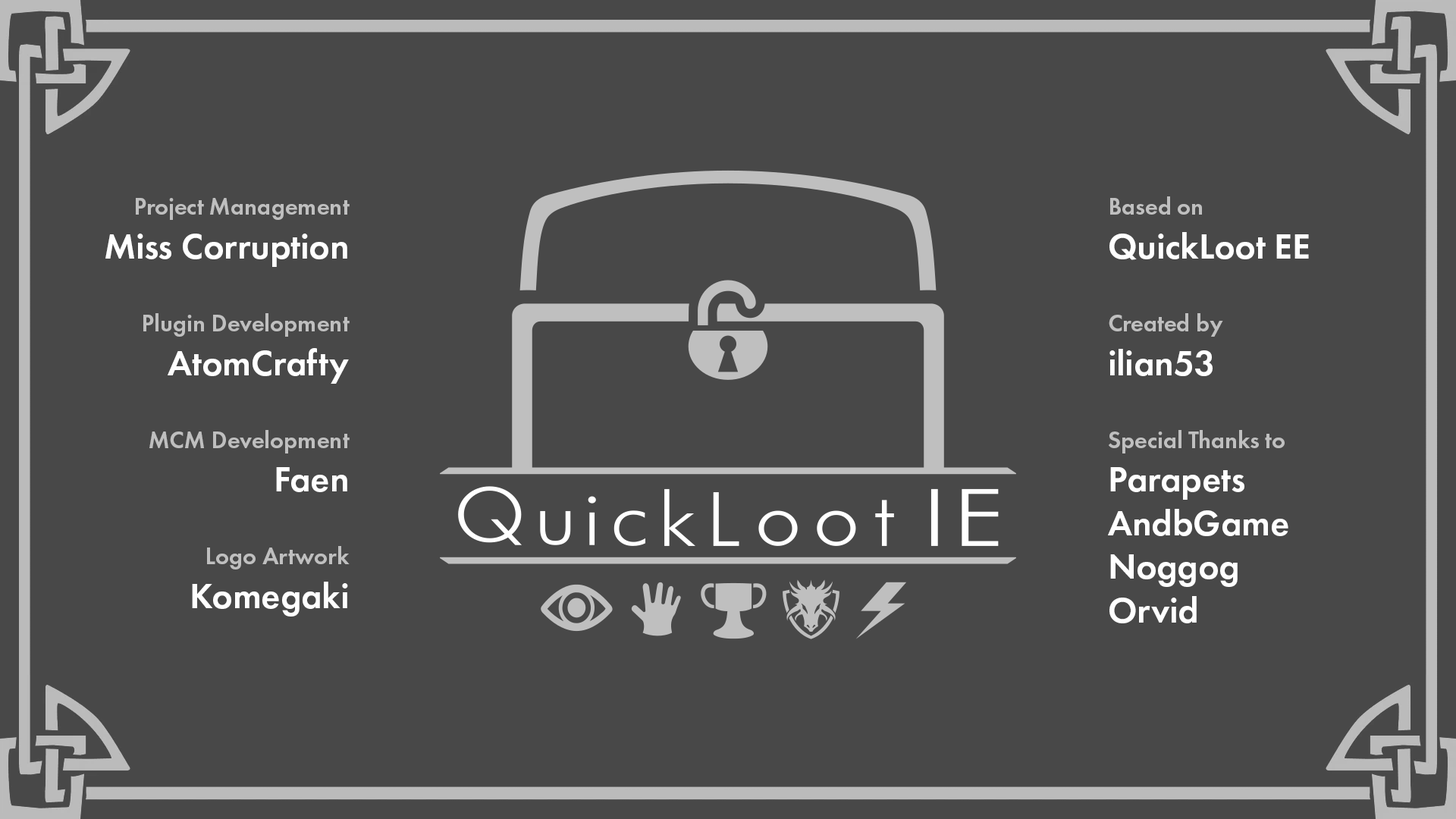
<style>
.page{position:relative;width:1456px;height:819px;background:#484848}
.page>*{position:absolute;margin:0}
.t1{font:24.3px "FuturaPT-DemiBold";color:#bfbfbf}
.t2{font:36.4px "FuturaPT-DemiBold";color:#ffffff}
</style>
<div class="page">
<p class="t1" style="left:105px;top:198px;width:245px;height:419px;text-align:right">Project Management<br><span class="t2">Miss Corruption<br><br></span>Plugin Development<br><span class="t2">AtomCrafty<br><br></span>MCM Development<br><span class="t2">Faen<br><br></span>Logo Artwork<br><span class="t2">Komegaki</span></p>
<p class="t2" style="left:1108px;top:196px;width:201px;height:427px"><span class="t1">Based on<br></span>QuickLoot EE<br><br><span class="t1">Created by<br></span>ilian53<br><br><span class="t1">Special Thanks to<br></span>Parapets<br>AndbGame<br>Noggog<br>Orvid</p>
</div>
